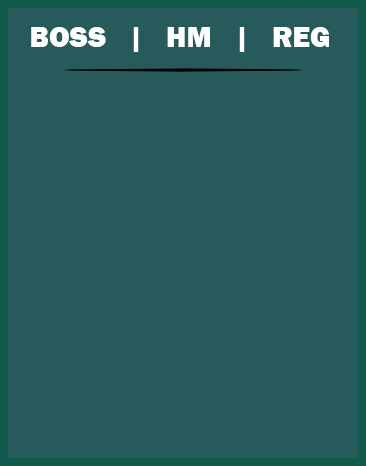
<style>
.page{position:relative;width:366px;height:466px;background:#275a5a}
.page>*{position:absolute;margin:0}
.t1{font:30px "FranklinGothic-Heavy";color:#ffffff}
</style>
<div class="page">
<p class="t1" style="left:31px;top:27px;width:298px;height:25px">BOSS   |   HM   |   REG</p>
</div>
